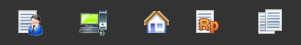
<style>
.page{position:relative;width:301px;height:45px;background:#333333}
.page>*{position:absolute;margin:0}
.t1{font:14.4px "Arial-BoldMT"}
</style>
<div class="page">
<p class="t1" style="left:200px;top:19px;width:18px;height:14px">Rp</p>
</div>
